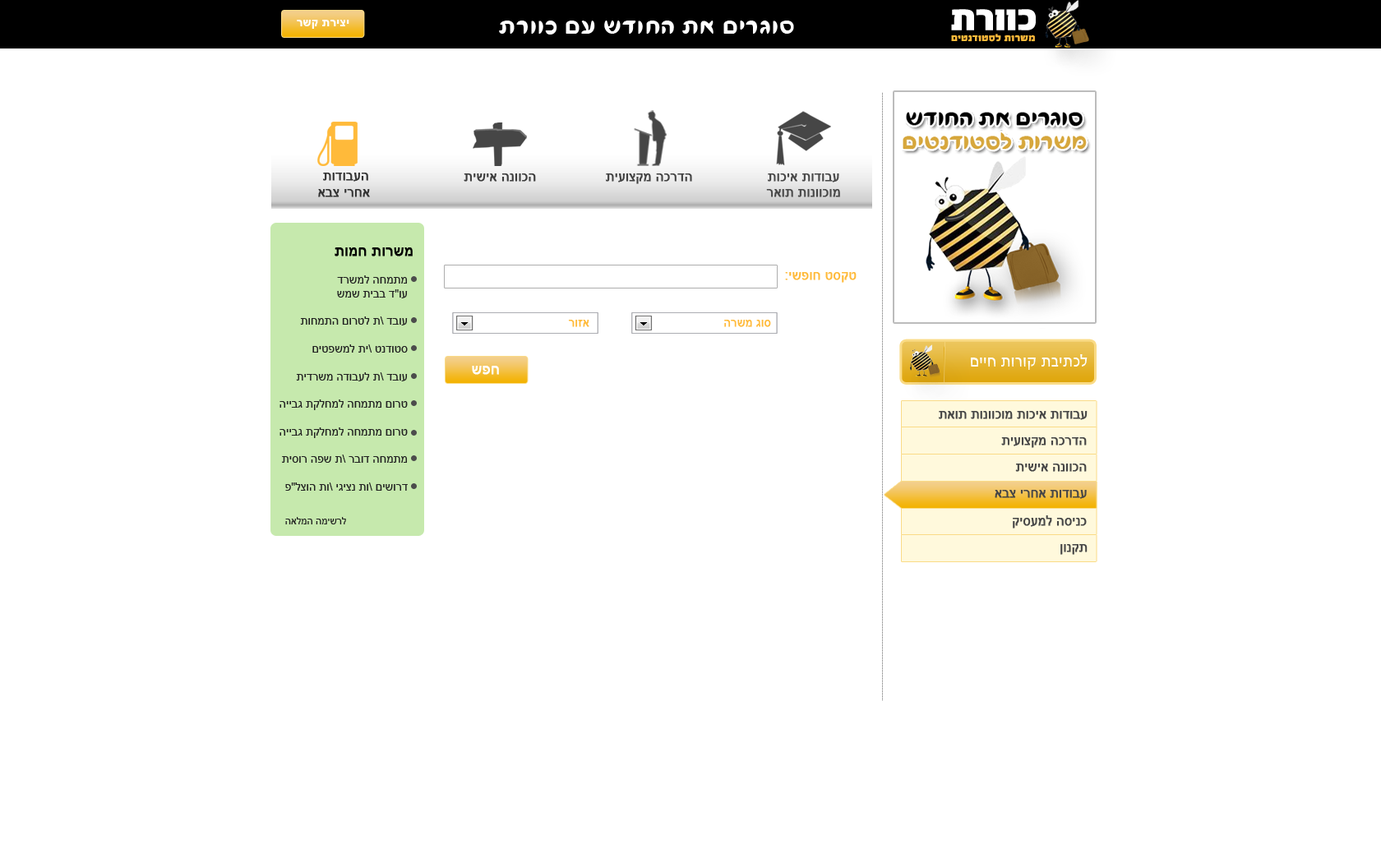
<style>
.page{position:relative;width:1381px;height:863px;background:#ffffff}
.page>*{position:absolute;margin:0}
.t1{font:11.5px "Arial-BoldMT";letter-spacing:0.03em;color:#ffffff}
.t2{font:28.8px "FbFlamingo-Regular";letter-spacing:0.03em;color:#ffffff}
.t3{font:9.9px "FbAdrenalin-Black";letter-spacing:0.03em;color:#ffba3a}
.t4{font:13.2px "ArialMT";color:#333333;font-weight:bold}
.t5{font:13.2px "ArialMT";color:#3c3c3c;font-weight:bold}
.t6{font:13.2px "ArialMT";color:#414141;font-weight:bold}
.t7{font:13.2px "ArialMT";color:#484848;font-weight:bold}
.t8{font:14.8px "ArialMT";color:#000000;font-weight:bold}
.t9{font:11.5px "ArialMT";color:#212121}
.t10{font:13.2px "ArialMT";color:#ffba3a;font-weight:bold}
.t11{font:11.5px "ArialMT";color:#ffba3a;font-weight:bold}
.t12{font:14.8px "ArialMT";color:#ffffff;font-weight:bold}
.t13{font:16.4px "FbConcept-Regular";letter-spacing:0.03em;color:#ffffff}
.t14{font:12.9px "ArialMT";color:#464646;font-weight:bold}
.t15{font:9.9px "ArialMT";color:#212121}
</style>
<div class="page">
<p class="t1" style="left:297px;top:20px;width:52px;height:9px">רשק תריצי</p>
<p class="t2" style="left:499px;top:21px;width:295px;height:14px">תרווכ םע שדוחה תא םירגוס</p>
<p class="t3" style="left:951px;top:34px;width:84px;height:8px">םיטנדוטסל תורשמ</p>
<p class="t4" style="left:318px;top:173px;width:52px;height:24px;text-align:center">תודובעה<br>אבצ ירחא</p>
<p class="t5" style="left:464px;top:173px;width:72px;height:9px">תישיא הנווכה</p>
<p class="t6" style="left:606px;top:173px;width:86px;height:11px">תיעוצקמ הכרדה</p>
<p class="t7" style="left:766px;top:173px;width:74px;height:24px;text-align:center">תוכיא תודובע<br>ראות תונווכומ</p>
<p class="t8" style="left:335px;top:247px;width:78px;height:10px">תומח תורשמ</p>
<p class="t9" style="left:280px;top:275px;width:128px;height:216px;text-align:right">דרשמל החמתמ<br>שמש תיבב ד"וע<br><br>תוחמתה םורטל ת\ דבוע<br><br>םיטפשמל תי\ טנדוטס<br><br>תידרשמ הדובעל ת\ דבוע<br><br>הייבג תקלחמל החמתמ םורט<br><br>הייבג תקלחמל החמתמ םורט<br><br>תיסור הפש ת\ רבוד החמתמ <br><br>פ"לצוה תו\ יגיצנ תו\ םישורד</p>
<p class="t10" style="left:785px;top:272px;width:72px;height:11px">:ישפוח טסקט</p>
<p class="t11" style="left:568px;top:320px;width:22px;height:7px">רוזא</p>
<p class="t11" style="left:724px;top:320px;width:47px;height:7px">הרשמ גוס</p>
<p class="t12" style="left:472px;top:366px;width:27px;height:9px">שפח</p>
<p class="t13" style="left:971px;top:354px;width:117px;height:16px">םייח תורוק תביתכל</p>
<p class="t14" style="left:939px;top:411px;width:149px;height:9px">תאות תונווכומ תוכיא תודובע</p>
<p class="t14" style="left:1001px;top:437px;width:86px;height:11px">תיעוצקמ הכרדה</p>
<p class="t14" style="left:1015px;top:464px;width:72px;height:8px">תישיא הנווכה</p>
<p class="t14" style="left:995px;top:490px;width:92px;height:9px">אבצ ירחא תודובע</p>
<p class="t15" style="left:285px;top:517px;width:61px;height:8px">האלמה המישרל</p>
<p class="t14" style="left:1013px;top:516px;width:74px;height:13px">קיסעמל הסינכ</p>
<p class="t14" style="left:1061px;top:544px;width:27px;height:11px">ןונקת</p>
</div>
